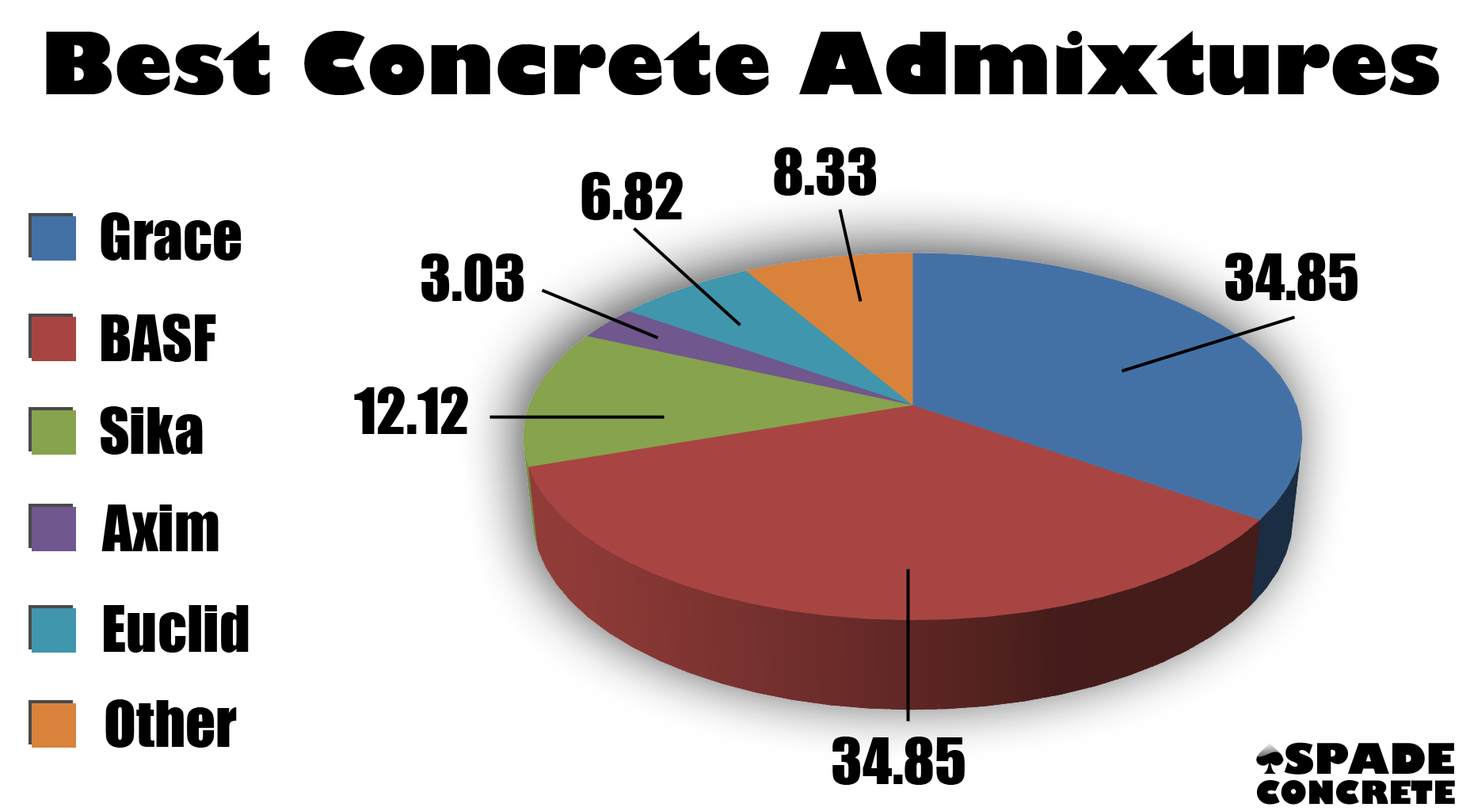
<style>
.page{position:relative;width:1470px;height:811px;background:#ffffff}
.page>*{position:absolute;margin:0}
.t1{font:84.3px "GillSans-UltraBold";color:#000000}
.t2{font:59.4px "Impact";color:#000000}
</style>
<div class="page">
<p class="t1" style="left:46px;top:31px;width:1393px;height:64px">Best Concrete Admixtures</p>
<p class="t2" style="left:774px;top:147px;width:103px;height:49px">8.33</p>
<p class="t2" style="left:581px;top:172px;width:102px;height:48px">6.82</p>
<p class="t2" style="left:101px;top:212px;width:141px;height:49px">Grace</p>
<p class="t2" style="left:421px;top:253px;width:103px;height:49px">3.03</p>
<p class="t2" style="left:1225px;top:253px;width:133px;height:48px">34.85</p>
<p class="t2" style="left:101px;top:314px;width:115px;height:48px">BASF</p>
<p class="t2" style="left:354px;top:387px;width:114px;height:47px">12.12</p>
<p class="t2" style="left:100px;top:406px;width:103px;height:49px">Sika</p>
<p class="t2" style="left:101px;top:505px;width:118px;height:46px">Axim</p>
<p class="t2" style="left:104px;top:605px;width:145px;height:48px">Euclid</p>
<p class="t2" style="left:105px;top:699px;width:132px;height:49px">Other</p>
<p class="t2" style="left:832px;top:737px;width:133px;height:48px">34.85</p>
</div>
